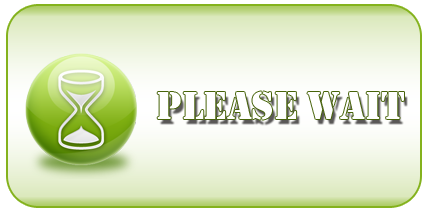
<style>
.page{position:relative;width:432px;height:216px}
.page>*{position:absolute;margin:0}
.t1{font:40px "Stencil";color:#ffffff}
</style>
<div class="page">
<p class="t1" style="left:157px;top:91px;width:247px;height:29px">Please Wait</p>
</div>
